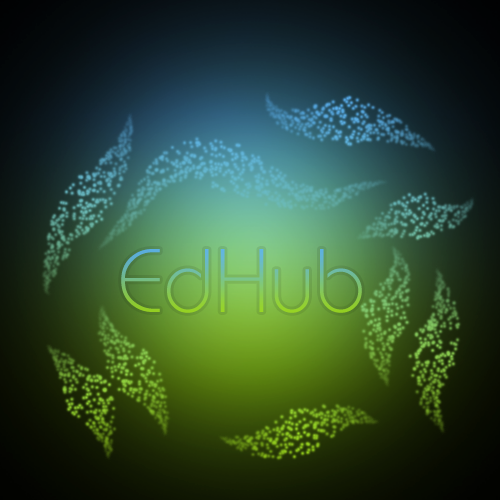
<style>
.page{position:relative;width:500px;height:500px}
.page>*{position:absolute;margin:0}
.t1{font:90px "Brie-Light"}
</style>
<div class="page">
<p class="t1" style="left:121px;top:249px;width:241px;height:64px">EdHub</p>
</div>
